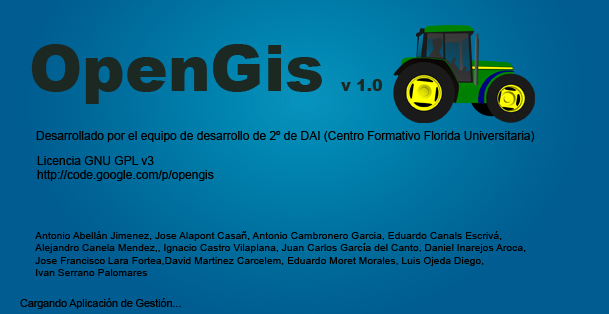
<style>
.page{position:relative;width:609px;height:314px}
.page>*{position:absolute;margin:0}
.t1{font:64px "Arial-Black";color:#1c2822}
.t2{font:16px "Arial-Black";color:#1c2822}
.t3{font:12px "ArialMT";color:#000000}
.t4{font:10.4px "ArialMT";color:#000000}
.t5{font:10.7px "ArialMT";color:#000000}
</style>
<div class="page">
<p class="t1" style="left:31px;top:44px;width:291px;height:60px">OpenGis</p>
<p class="t2" style="left:341px;top:79px;width:41px;height:12px">v 1.0</p>
<p class="t3" style="left:36px;top:131px;width:499px;height:11px">Desarrollado por el equipo de desarrollo de 2º de DAI (Centro Formativo Florida Universitaria)</p>
<p class="t3" style="left:37px;top:156px;width:177px;height:25px">Licencia GNU GPL v3<br>http://code.google.com/p/opengis</p>
<p class="t4" style="left:35px;top:231px;width:491px;height:45px">Antonio Abellán Jimenez, Jose Alapont Casañ, Antonio Cambronero Garcia, Eduardo Canals Escrivá, <br>Alejandro Canela Mendez,, Ignacio Castro Vilaplana, Juan Carlos García del Canto, Daniel Inarejos Aroca, <br>Jose Francisco Lara Fortea,David Martinez Carcelem, Eduardo Moret Morales, Luis Ojeda Diego, <br>Ivan Serrano Palomares</p>
<p class="t5" style="left:20px;top:298px;width:161px;height:11px">Cargando Aplicación de Gestión...</p>
</div>
